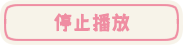
<style>
.page{position:relative;width:183px;height:45px;background:#f7f3e9}
.page>*{position:absolute;margin:0}
.t1{font:12px "shetumodengxiaofangti";color:#ef8da2;font-weight:bold;scale:0.94 1}
</style>
<div class="page">
<p class="t1" style="left:54px;top:13px;width:76px;height:19px">停止播放</p>
</div>
